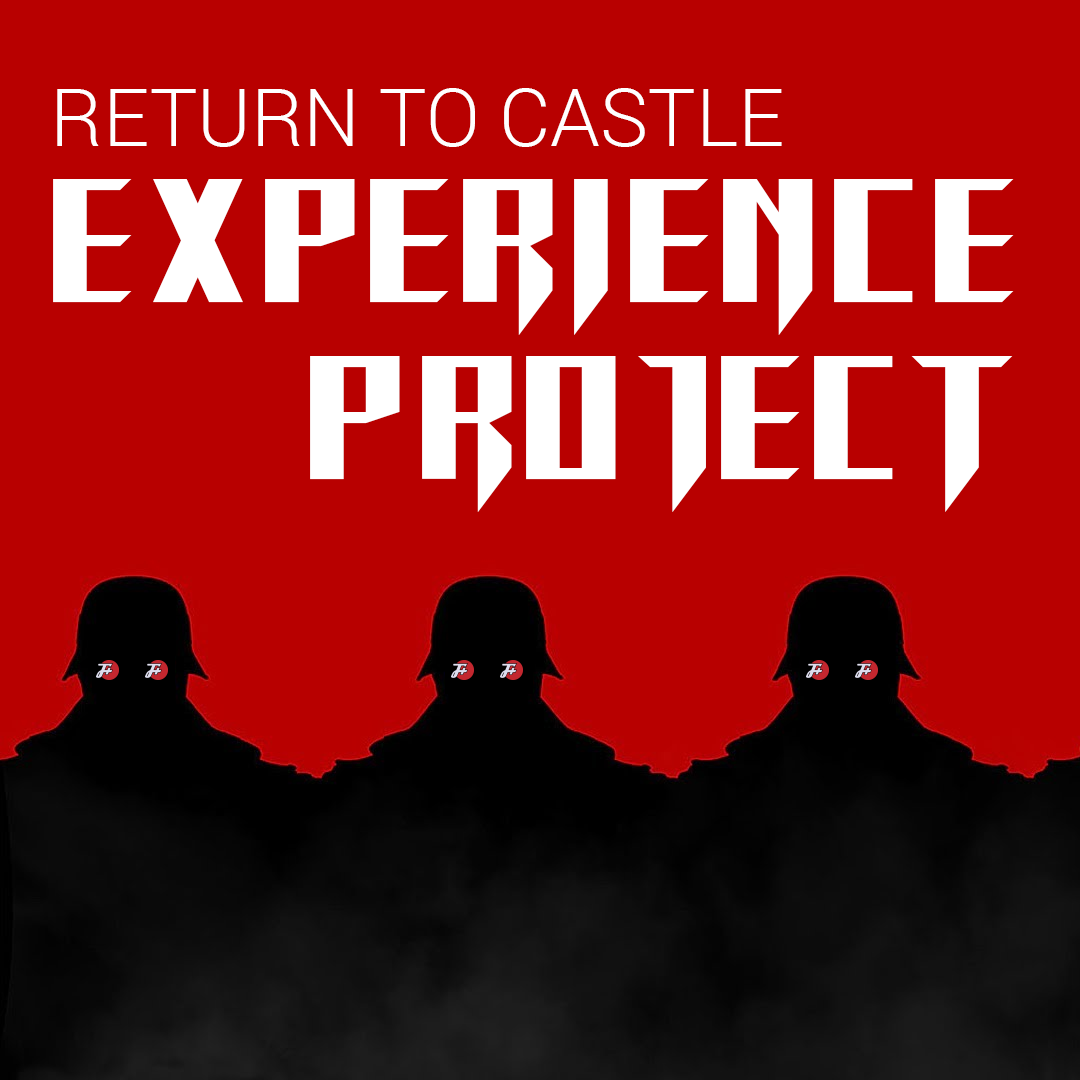
<style>
.page{position:relative;width:1080px;height:1080px;background:#b80000}
.page>*{position:absolute;margin:0}
.t1{font:80px "Roboto-Light";color:#ffffff}
.t2{font:223.1px "RETURNTOCASTLE";color:#ffffff}
</style>
<div class="page">
<p class="t1" style="left:57px;top:88px;width:725px;height:59px">RETURN TO CASTLE</p>
<p class="t2" style="left:53px;top:179px;width:961px;height:156px">Experience</p>
<p class="t2" style="left:310px;top:356px;width:703px;height:156px">Project</p>
</div>
